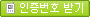
<style>
.page{position:relative;width:90px;height:17px}
.page>*{position:absolute;margin:0}
.t1{font:12px "morris9";letter-spacing:-0.03em;color:#ffffff}
</style>
<div class="page">
<p class="t1" style="left:20px;top:3px;width:63px;height:10px">인증번호 받기</p>
</div>
